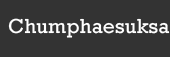
<style>
.page{position:relative;width:170px;height:57px;background:#333333}
.page>*{position:absolute;margin:0}
.t1{font:20.8px "Rockwell";color:#ffffff}
</style>
<div class="page">
<p class="t1" style="left:8px;top:18px;width:162px;height:20px">Chumphaesuksa</p>
</div>
